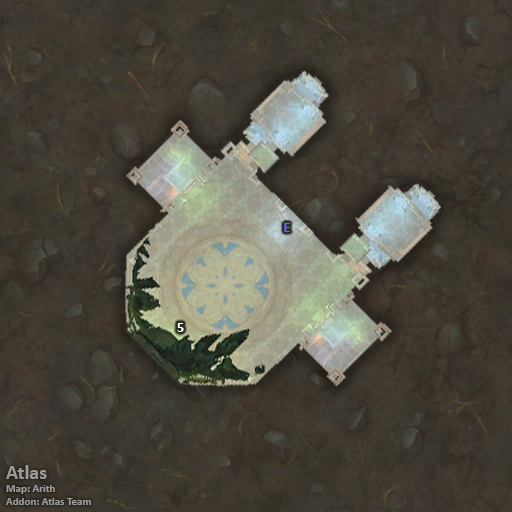
<style>
.page{position:relative;width:512px;height:512px}
.page>*{position:absolute;margin:0}
.t1{font:14px "Calibri-Bold";color:#6666ff}
.t2{font:14px "Calibri-Bold";color:#ffffff}
.t3{font:11px "Calibri-Bold";color:#9d9b98}
.t4{font:20px "Calibri-Bold";color:#9d9b98}
</style>
<div class="page">
<p class="t1" style="left:284px;top:223px;width:6px;height:9px">E</p>
<p class="t2" style="left:177px;top:323px;width:7px;height:9px">5</p>
<p class="t3" style="left:6px;top:465px;width:85px;height:40px"><span class="t4">Atlas<br></span>Map: Arith<br>Addon: Atlas Team</p>
</div>
